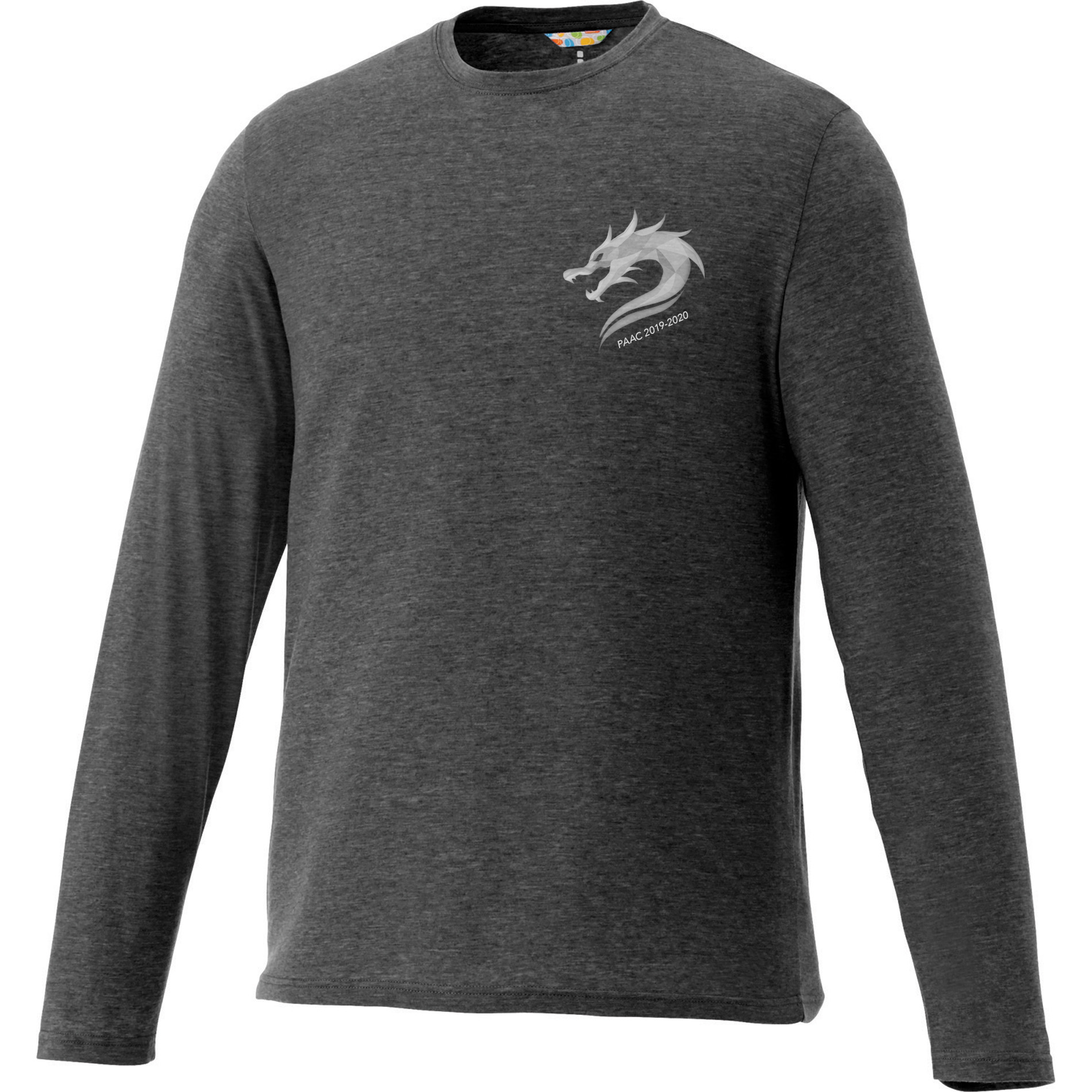
<style>
.page{position:relative;width:1092px;height:1092px;background:#ffffff}
.page>*{position:absolute;margin:0}
.t1{font:10px "AvenirNext-MediumItalic";color:#d6d6d6}
</style>
<div class="page">
<p class="t1" style="left:617px;top:311px;width:72px;height:37px;rotate:-24deg">PAAC 2019-2020</p>
</div>
